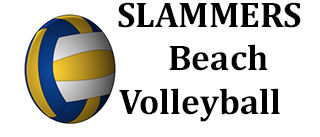
<style>
.page{position:relative;width:320px;height:137px;background:#ffffff}
.page>*{position:absolute;margin:0}
.t1{font:36px "Cambria-Bold";color:#000000}
.t2{font:36px "Bauhaus93";color:#000000}
</style>
<div class="page">
<p class="t1" style="left:118px;top:2px;width:183px;height:120px;text-align:center"><span class="t2"> </span>SLAMMERS     Beach <br>Volleyball</p>
</div>
